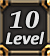
<style>
.page{position:relative;width:50px;height:56px}
.page>*{position:absolute;margin:0}
.t1{font:24px "BookAntiqua-BoldItalic";color:#e3e3e3;font-weight:bold;scale:1.2 1}
.t2{font:18px "Calibri-BoldItalic";letter-spacing:-0.025em;color:#e3e3e3;font-weight:bold}
</style>
<div class="page">
<p class="t1" style="left:10px;top:10px;width:29px;height:19px">10</p>
<p class="t2" style="left:5px;top:31px;width:40px;height:14px">Level</p>
</div>
